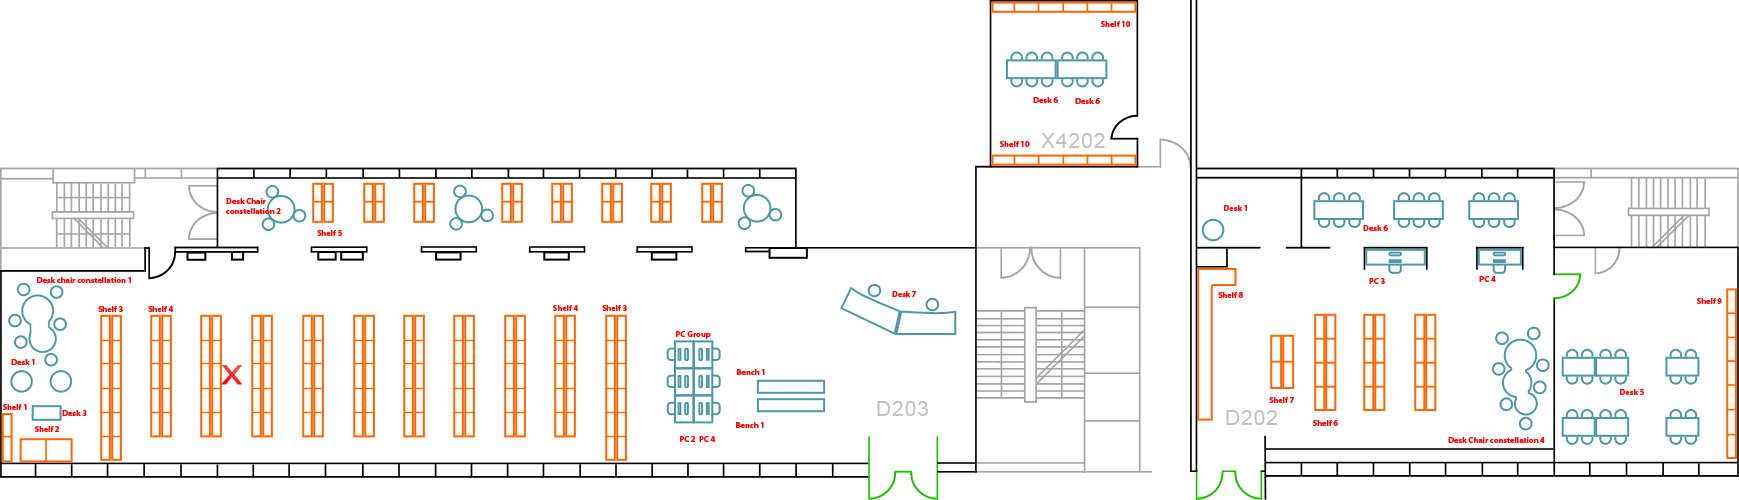
<style>
.page{position:relative;width:1739px;height:500px;background:#ffffff}
.page>*{position:absolute;margin:0}
.t1{font:8.4px "MyriadPro-Bold";color:#ff0000}
.t2{font:20.8px "ArialMT";letter-spacing:0.05em;color:#c2c2c2}
.t3{font:26.8px "MicrosoftTaiLe";letter-spacing:0.2em;font-weight:bold;scale:1.33 1}
</style>
<div class="page">
<p class="t1" style="left:1101px;top:21px;width:29px;height:6px">Shelf 10</p>
<p class="t1" style="left:1033px;top:97px;width:25px;height:6px">Desk 6</p>
<p class="t1" style="left:1075px;top:98px;width:25px;height:6px">Desk 6</p>
<p class="t2" style="left:1041px;top:133px;width:64px;height:15px">X4202</p>
<p class="t1" style="left:1000px;top:141px;width:30px;height:6px">Shelf 10</p>
<p class="t1" style="left:226px;top:198px;width:55px;height:16px">Desk Chair<br>constellation 2</p>
<p class="t1" style="left:1224px;top:205px;width:23px;height:6px">Desk 1</p>
<p class="t1" style="left:317px;top:230px;width:25px;height:6px">Shelf 5</p>
<p class="t1" style="left:1363px;top:225px;width:25px;height:6px">Desk 6</p>
<p class="t1" style="left:37px;top:277px;width:94px;height:6px">Desk chair constellation 1</p>
<p class="t1" style="left:1369px;top:278px;width:16px;height:6px">PC 3</p>
<p class="t1" style="left:1479px;top:276px;width:17px;height:6px">PC 4</p>
<p class="t1" style="left:892px;top:291px;width:25px;height:6px">Desk 7</p>
<p class="t1" style="left:1218px;top:292px;width:25px;height:6px">Shelf 8</p>
<p class="t1" style="left:553px;top:305px;width:26px;height:6px">Shelf 4</p>
<p class="t1" style="left:602px;top:305px;width:25px;height:6px">Shelf 3</p>
<p class="t1" style="left:1697px;top:298px;width:25px;height:6px">Shelf 9</p>
<p class="t1" style="left:98px;top:306px;width:25px;height:6px">Shelf 3</p>
<p class="t1" style="left:148px;top:306px;width:26px;height:6px">Shelf 4</p>
<p class="t1" style="left:676px;top:331px;width:35px;height:8px">PC Group</p>
<p class="t1" style="left:11px;top:359px;width:24px;height:6px">Desk 1</p>
<p class="t3" style="left:221px;top:365px;width:21px;height:20px">X</p>
<p class="t1" style="left:737px;top:369px;width:28px;height:6px">Bench 1</p>
<p class="t1" style="left:1620px;top:389px;width:24px;height:6px">Desk 5</p>
<p class="t2" style="left:877px;top:401px;width:52px;height:15px">D203</p>
<p class="t1" style="left:1269px;top:397px;width:25px;height:6px">Shelf 7</p>
<p class="t1" style="left:3px;top:404px;width:24px;height:6px">Shelf 1</p>
<p class="t1" style="left:62px;top:410px;width:25px;height:6px">Desk 3</p>
<p class="t2" style="left:1226px;top:410px;width:51px;height:15px">D202</p>
<p class="t1" style="left:736px;top:422px;width:28px;height:6px">Bench 1</p>
<p class="t1" style="left:1313px;top:420px;width:25px;height:6px">Shelf 6</p>
<p class="t1" style="left:35px;top:426px;width:25px;height:6px">Shelf 2</p>
<p class="t1" style="left:680px;top:436px;width:16px;height:6px">PC 2</p>
<p class="t1" style="left:699px;top:436px;width:17px;height:6px">PC 4</p>
<p class="t1" style="left:1448px;top:437px;width:97px;height:6px">Desk Chair constellation 4</p>
</div>
